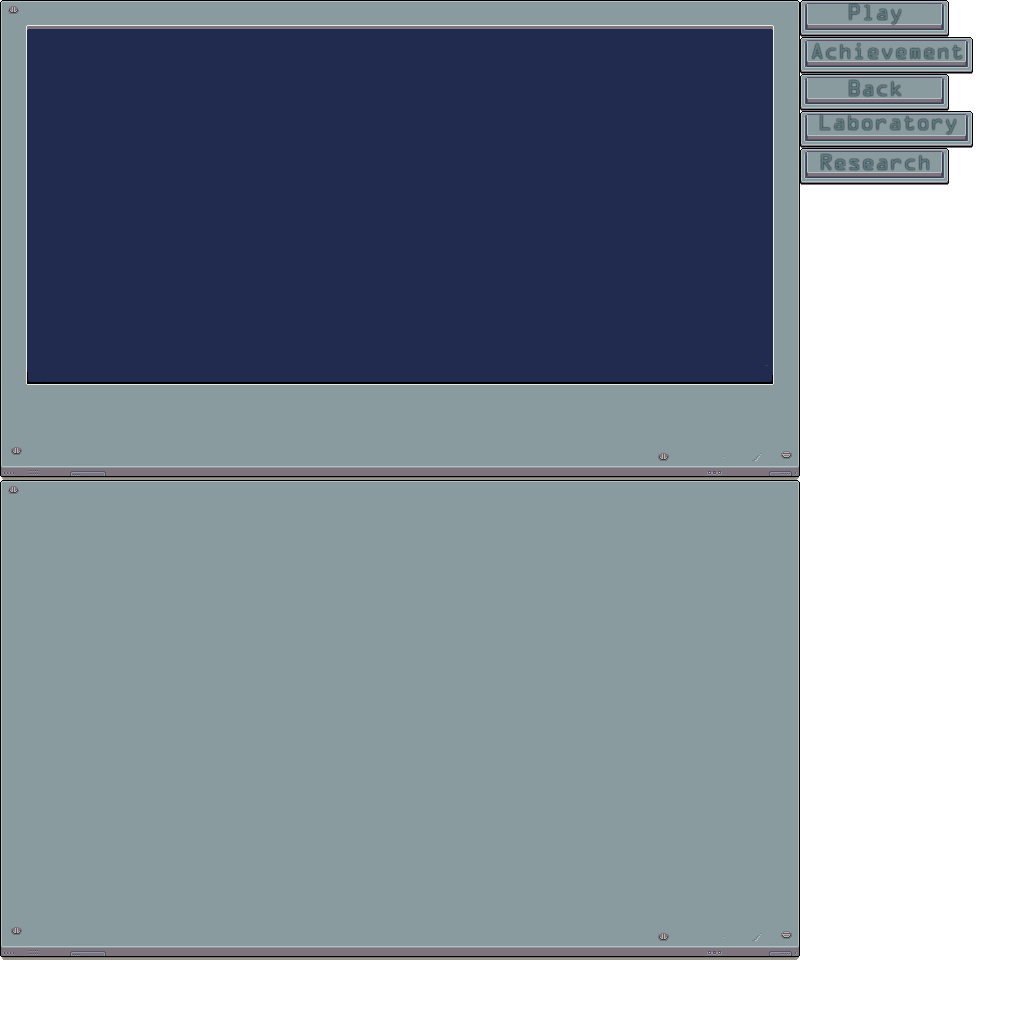
<style>
.page{position:relative;width:1024px;height:1024px;background:#8a9ba0}
.page>*{position:absolute;margin:0}
.t1{font:20px "OCRAStd";color:#5f7b82}
</style>
<div class="page">
<p class="t1" style="left:849px;top:4px;width:52px;height:21px">Play</p>
<p class="t1" style="left:812px;top:43px;width:150px;height:16px">Achievement</p>
<p class="t1" style="left:849px;top:80px;width:52px;height:16px">Back</p>
<p class="t1" style="left:820px;top:114px;width:136px;height:21px">Laboratory</p>
<p class="t1" style="left:821px;top:154px;width:108px;height:16px">Research</p>
</div>
